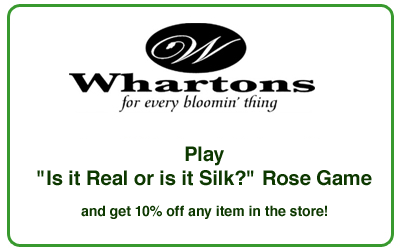
<style>
.page{position:relative;width:400px;height:250px;background:#ffffff}
.page>*{position:absolute;margin:0}
.t1{font:14px/18px "Helvetica-Bold";color:#0d3800}
.t2{font:20px/30px "Helvetica-Bold";color:#0d3800}
.t3{font:20px/24px "Helvetica-Bold";color:#0d3800}
</style>
<div class="page">
<p class="t1" style="left:37px;top:146px;width:335px;height:73px;text-align:center"><span class="t2">Play<br></span><span class="t3">"Is it Real or is it Silk?" Rose Game<br><br></span>and get 10% off any item in the store!</p>
</div>
